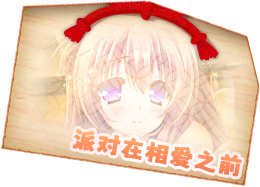
<style>
.page{position:relative;width:260px;height:187px}
.page>*{position:absolute;margin:0}
.t1{font:24px "MaokenAssortedSans";color:#ff925f;font-weight:bold}
</style>
<div class="page">
<p class="t1" style="left:72px;top:128px;width:170px;height:49px;rotate:10deg">派对在相爱之前</p>
</div>
